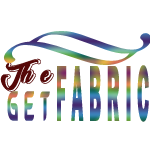
<style>
.page{position:relative;width:150px;height:150px;background:#ffffff}
.page>*{position:absolute;margin:0}
.t1{font:31.7px "DaywalkerRegular";letter-spacing:0.3em;color:#550808;scale:0.93 1}
.t2{font:82px "FranklinGothic-Heavy";letter-spacing:0.3em;scale:0.23 1}
.t3{font:42.2px "Belgrado-Regular";letter-spacing:0.3em;scale:0.46 1}
</style>
<div class="page">
<p class="t1" style="left:0px;top:58px;width:54px;height:34px">The</p>
<p class="t2" style="left:57px;top:65px;width:92px;height:57px">FABRIC</p>
<p class="t3" style="left:7px;top:91px;width:43px;height:30px">GET</p>
</div>
